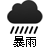
<style>
.page{position:relative;width:50px;height:48px;background:#ffffff}
.page>*{position:absolute;margin:0}
.t1{font:12px "OPPOSans-R";color:#000000}
</style>
<div class="page">
<p class="t1" style="left:13px;top:36px;width:23px;height:11px">暴雨</p>
</div>
